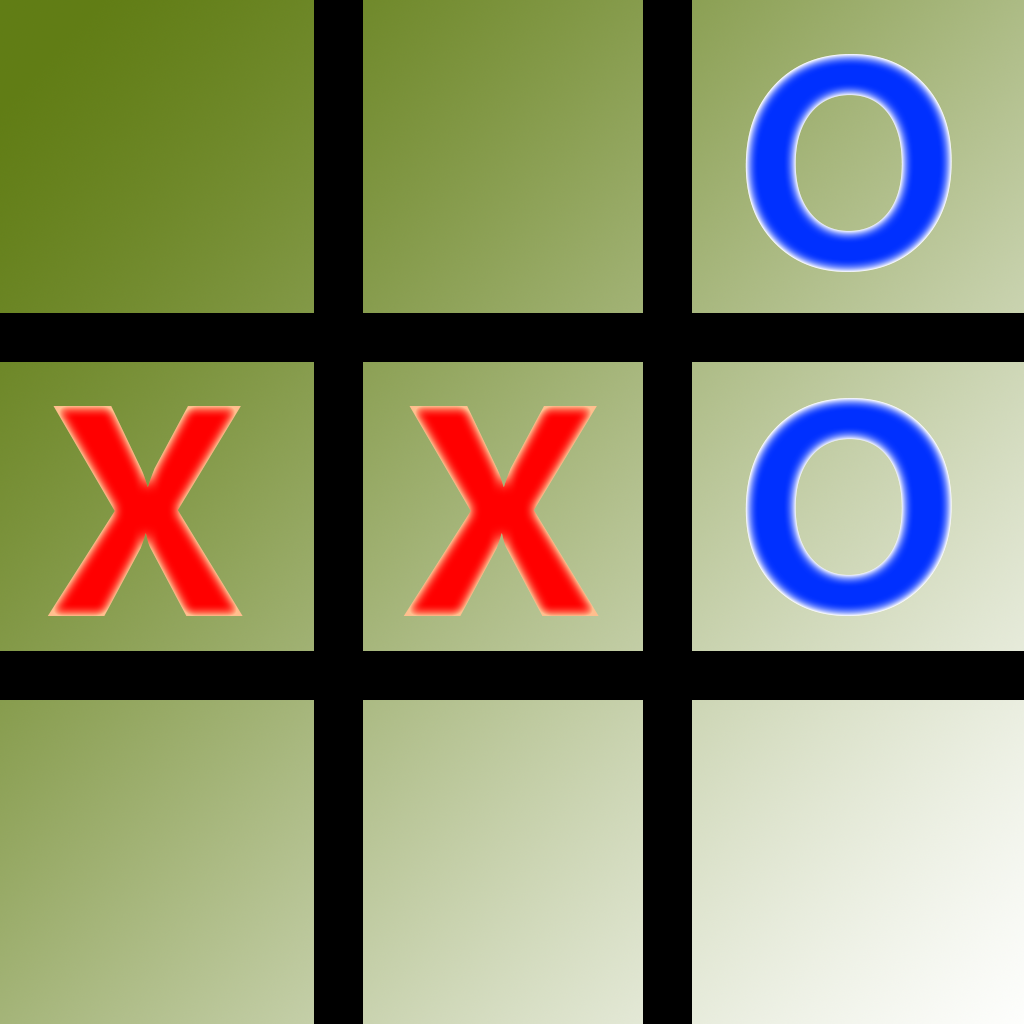
<style>
.page{position:relative;width:1024px;height:1024px}
.page>*{position:absolute;margin:0}
.t1{font:300px "SegoeUI-Bold";color:#0030ff}
.t2{font:300px "SegoeUI-Bold";color:#ff0000}
</style>
<div class="page">
<p class="t1" style="left:745px;top:54px;width:207px;height:218px">O</p>
<p class="t1" style="left:745px;top:398px;width:207px;height:218px">O</p>
<p class="t2" style="left:47px;top:406px;width:196px;height:210px">X</p>
<p class="t2" style="left:403px;top:406px;width:196px;height:210px">X</p>
</div>
